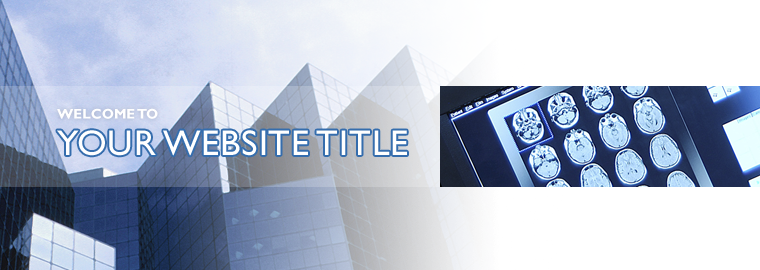
<style>
.page{position:relative;width:760px;height:270px;background:#ffffff}
.page>*{position:absolute;margin:0}
.t1{font:14px "GillSans-Bold";color:#ffffff;text-transform:uppercase}
.t2{font:36px "GillSans";letter-spacing:0.025em;color:#ffffff;text-transform:uppercase}
</style>
<div class="page">
<p class="t1" style="left:57px;top:108px;width:101px;height:11px">welcome to</p>
<p class="t2" style="left:57px;top:130px;width:350px;height:26px">your website title</p>
</div>
